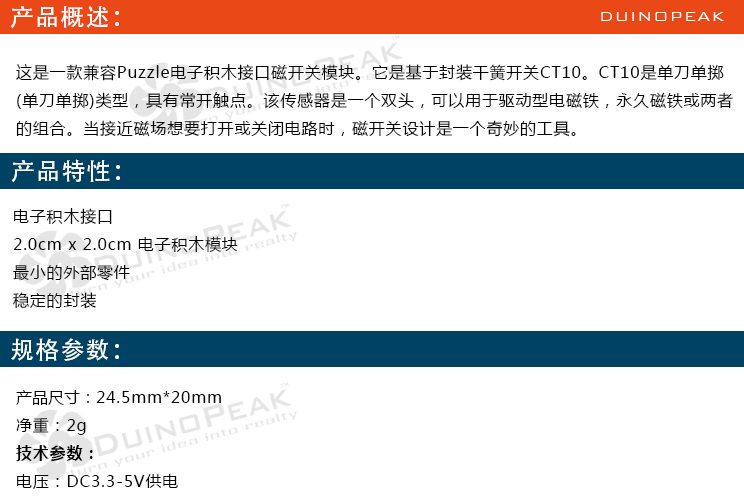
<style>
.page{position:relative;width:744px;height:496px;background:#ffffff}
.page>*{position:absolute;margin:0}
.t1{font:24px "AdobeHeitiStd-Regular";letter-spacing:0.05em;color:#ffffff}
.t2{font:18px "BankGothicBT-Light";letter-spacing:0.05em;color:#ffffff}
.t3{font:16px "MicrosoftYaHei";letter-spacing:0.05em;color:#000000}
.t4{font:16px "MicrosoftYaHei";color:#000000}
.t5{font:16px "MicrosoftYaHei-Bold";letter-spacing:0.05em;color:#000000}
</style>
<div class="page">
<p class="t1" style="left:10px;top:6px;width:109px;height:23px">产品概述：</p>
<p class="t2" style="left:601px;top:12px;width:124px;height:9px">DUINOPEAK</p>
<p class="t3" style="left:16px;top:64px;width:717px;height:73px">这是一款兼容Puzzle电子积木接口磁开关模块。它是基于封装干簧开关CT10。CT10是单刀单掷<br>(单刀单掷)类型，具有常开触点。该传感器是一个双头，可以用于驱动型电磁铁，永久磁铁或两者<br>的组合。当接近磁场想要打开或关闭电路时，磁开关设计是一个奇妙的工具。</p>
<p class="t1" style="left:11px;top:159px;width:109px;height:24px">产品特性：</p>
<p class="t3" style="left:13px;top:208px;width:225px;height:101px">电子积木接口<br>2.0cm x 2.0cm 电子积木模块<br>最小的外部零件<br>稳定的封装</p>
<p class="t1" style="left:11px;top:338px;width:108px;height:23px">规格参数：</p>
<p class="t3" style="left:16px;top:390px;width:205px;height:99px"><span class="t4">产品尺寸：</span>24.5mm*20mm<br>净重：2g<br><span class="t5">技术参数：<br></span>电压：DC3.3-5V供电</p>
</div>
